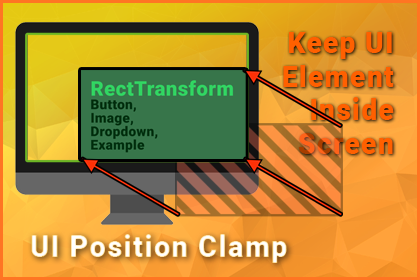
<style>
.page{position:relative;width:420px;height:280px}
.page>*{position:absolute;margin:0}
.t1{font:29.4px "Roboto-Black";letter-spacing:0.05em;color:#ff6000;scale:0.95 1}
.t2{font:30.5px "Roboto-Black";letter-spacing:0.05em;scale:0.95 1}
</style>
<div class="page">
<p class="t1" style="left:283px;top:32px;width:111px;height:122px;text-align:right">Keep UI<br>Element<br>Inside<br>Screen</p>
<p class="t2" style="left:31px;top:234px;width:256px;height:29px">UI Position Clamp</p>
</div>
